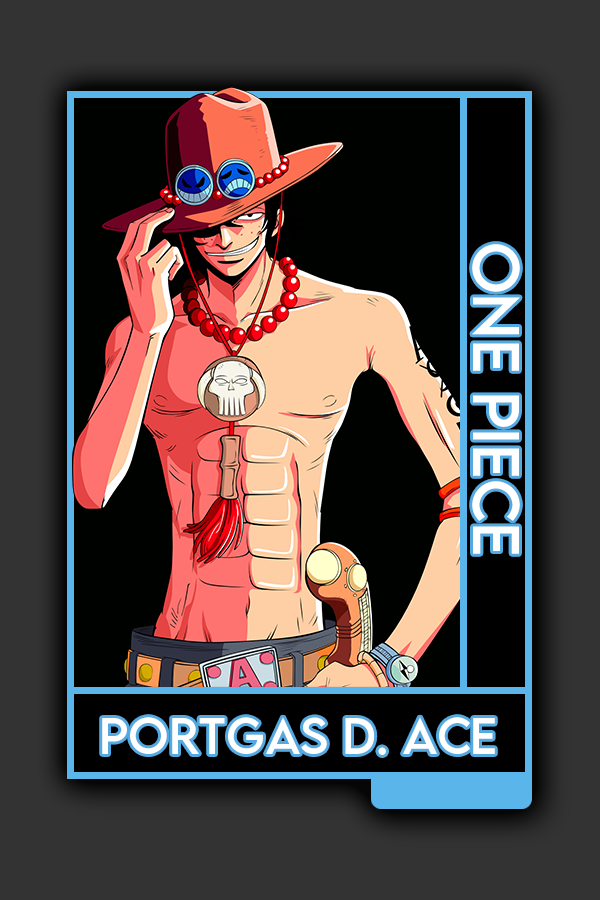
<style>
.page{position:relative;width:600px;height:900px;background:#333333}
.page>*{position:absolute;margin:0}
.t1{font:58.4px "LEMONMILK-Regular";color:#ffffff}
.t2{font:45.6px "LEMONMILK-Regular";color:#ffffff}
</style>
<div class="page">
<p class="t1" style="left:472px;top:244px;width:48px;height:310px;rotate:90deg">One Piece</p>
<p class="t2" style="left:102px;top:717px;width:393px;height:38px">Portgas D. Ace</p>
</div>
